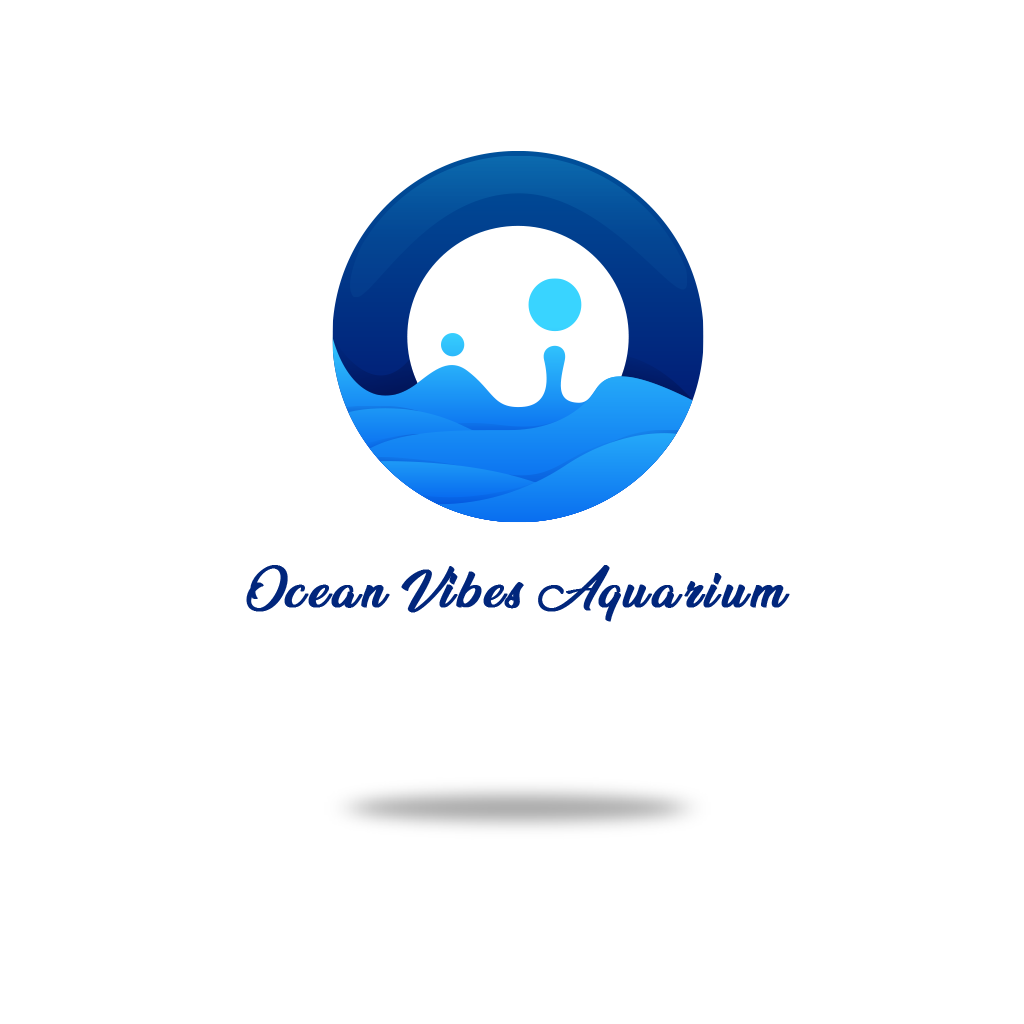
<style>
.page{position:relative;width:1024px;height:1024px;background:#ffffff}
.page>*{position:absolute;margin:0}
.t1{font:44px "AnandaBlack";letter-spacing:0.05em;color:#01267c;font-weight:bold}
</style>
<div class="page">
<p class="t1" style="left:246px;top:565px;width:544px;height:57px">Ocean Vibes Aquarium</p>
</div>
